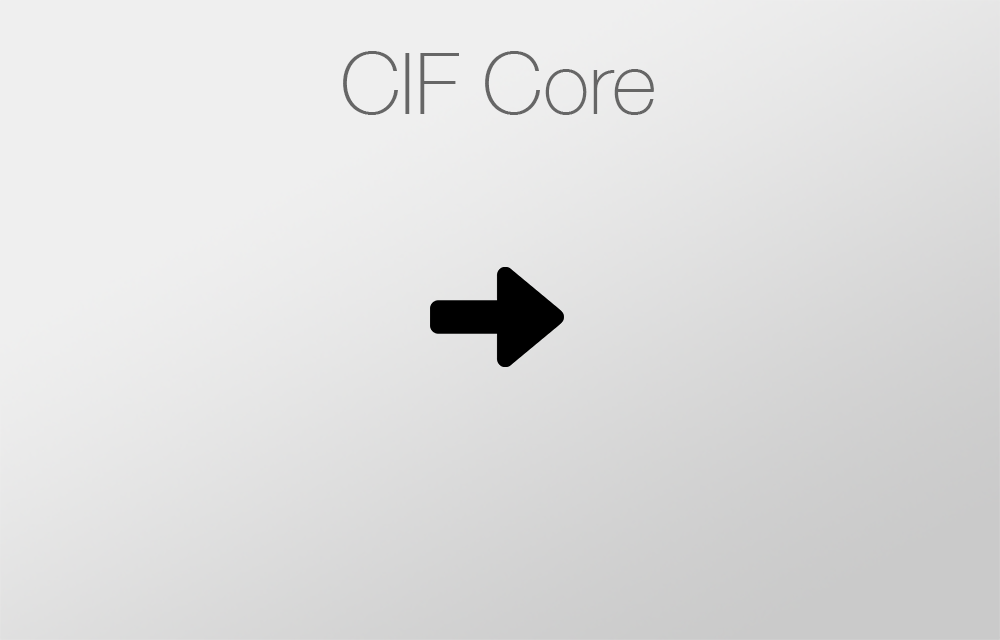
<style>
.page{position:relative;width:1000px;height:640px}
.page>*{position:absolute;margin:0}
.t1{font:85.7px "HelveticaNeue-Thin";color:#666666}
</style>
<div class="page">
<p class="t1" style="left:343px;top:51px;width:311px;height:64px">CIF Core</p>
</div>
